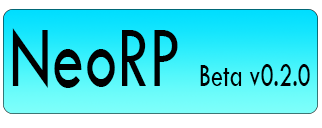
<style>
.page{position:relative;width:322px;height:128px}
.page>*{position:absolute;margin:0}
.t1{font:33.8px "TwCenMT-Regular";color:#000000;scale:0.72 1}
.t2{font:89.7px "TwCenMT-Regular";color:#000000;scale:0.72 1}
</style>
<div class="page">
<p class="t1" style="left:12px;top:28px;width:298px;height:60px"><span class="t2">NeoRP </span>Beta v0.2.0</p>
</div>
